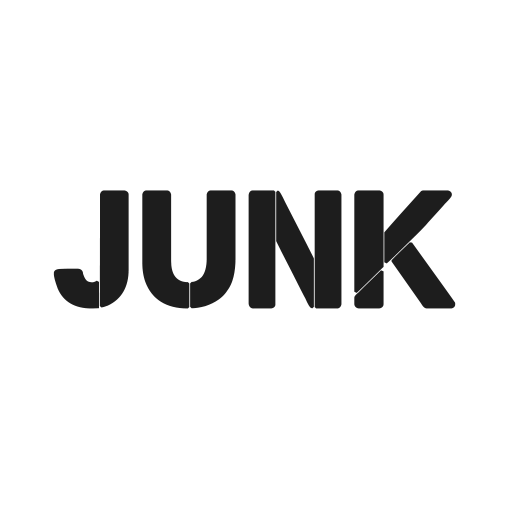
<style>
.page{position:relative;width:512px;height:512px;background:#ffffff}
.page>*{position:absolute;margin:0}
.t1{font:151.7px "NewStenciltfb";color:#1d1d1d;font-variant:small-caps;font-weight:bold}
</style>
<div class="page">
<p class="t1" style="left:53px;top:190px;width:403px;height:119px">junk</p>
</div>
